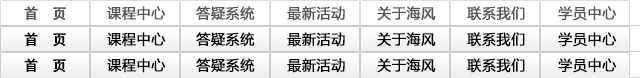
<style>
.page{position:relative;width:640px;height:78px;background:#ffffff}
.page>*{position:absolute;margin:0}
.t1{font:14px "CTCuHeiSJ";letter-spacing:0.02em;color:#555555;font-weight:bold}
.t2{font:14px "MicrosoftYaHei";letter-spacing:0.02em;color:#555555;font-weight:bold}
.t3{font:14px "CTCuHeiSJ";letter-spacing:0.02em;color:#000000;font-weight:bold}
.t4{font:14px "MicrosoftYaHei";letter-spacing:0.02em;color:#000000;font-weight:bold}
</style>
<div class="page">
<p class="t1" style="left:24px;top:6px;width:42px;height:14px">首   页</p>
<p class="t2" style="left:107px;top:6px;width:59px;height:15px">课程中心</p>
<p class="t2" style="left:196px;top:6px;width:59px;height:14px">答疑系统</p>
<p class="t2" style="left:287px;top:6px;width:58px;height:15px">最新活动</p>
<p class="t2" style="left:377px;top:6px;width:59px;height:15px">关于海风</p>
<p class="t2" style="left:467px;top:6px;width:58px;height:15px">联系我们</p>
<p class="t2" style="left:558px;top:6px;width:59px;height:15px">学员中心</p>
<p class="t3" style="left:24px;top:32px;width:42px;height:14px">首   页</p>
<p class="t4" style="left:107px;top:32px;width:59px;height:15px">课程中心</p>
<p class="t4" style="left:196px;top:32px;width:59px;height:14px">答疑系统</p>
<p class="t4" style="left:287px;top:32px;width:58px;height:15px">最新活动</p>
<p class="t4" style="left:377px;top:32px;width:59px;height:15px">关于海风</p>
<p class="t4" style="left:467px;top:32px;width:58px;height:15px">联系我们</p>
<p class="t4" style="left:558px;top:32px;width:59px;height:15px">学员中心</p>
<p class="t3" style="left:24px;top:58px;width:42px;height:14px">首   页</p>
<p class="t4" style="left:107px;top:58px;width:59px;height:15px">课程中心</p>
<p class="t4" style="left:196px;top:58px;width:59px;height:14px">答疑系统</p>
<p class="t4" style="left:287px;top:58px;width:58px;height:15px">最新活动</p>
<p class="t4" style="left:377px;top:58px;width:59px;height:15px">关于海风</p>
<p class="t4" style="left:467px;top:58px;width:58px;height:15px">联系我们</p>
<p class="t4" style="left:558px;top:58px;width:59px;height:15px">学员中心</p>
</div>
